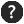
<style>
.page{position:relative;width:24px;height:24px;background:#282828}
.page>*{position:absolute;margin:0}
.t1{font:18px "SegoeUI-Semibold";color:#ffffff}
</style>
<div class="page">
<p class="t1" style="left:8px;top:5px;width:8px;height:14px">?</p>
</div>
